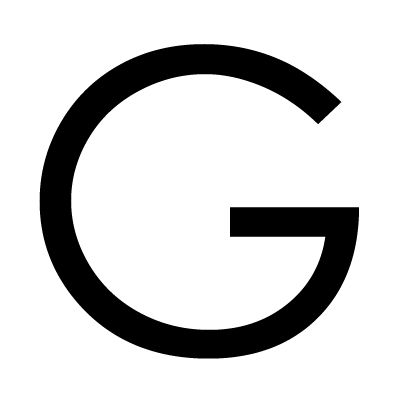
<style>
.page{position:relative;width:400px;height:400px;background:#ffffff}
.page>*{position:absolute;margin:0}
.t1{font:416.7px "CenturyGothic";color:#000000}
</style>
<div class="page">
<p class="t1" style="left:39px;top:44px;width:320px;height:315px">G</p>
</div>
